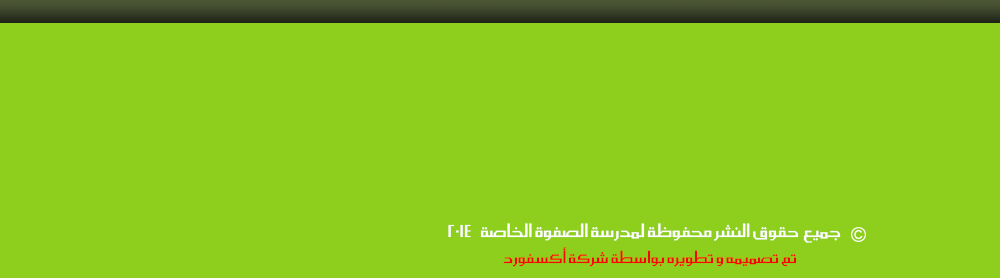
<style>
.page{position:relative;width:1000px;height:278px;background:#8ecf1d}
.page>*{position:absolute;margin:0}
.t1{font:22px "SC_KHALID";color:#fdfdfd}
.t2{font:20px "SC_KHALID";color:#f90505}
</style>
<div class="page">
<p class="t1" style="left:448px;top:223px;width:393px;height:20px">جميع  حقوق النشر محفوظة لمدرسة الصفوة الخاصة    2014</p>
<p class="t2" style="left:503px;top:247px;width:294px;height:20px">تم تصميمه و تطويره بواسطة شركة أكسفورد</p>
</div>
